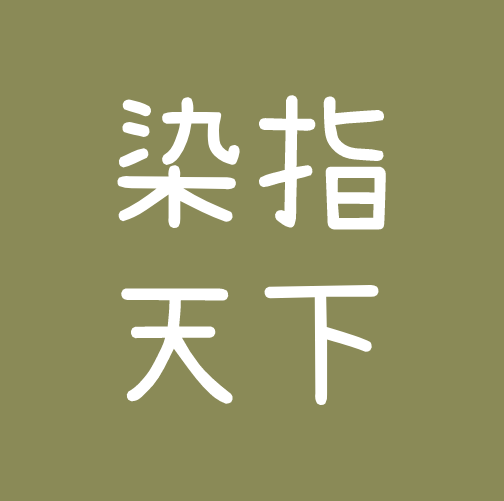
<style>
.page{position:relative;width:504px;height:501px;background:#8a8a57}
.page>*{position:absolute;margin:0}
.t1{font:150px "SetoFont";color:#ffffff}
</style>
<div class="page">
<p class="t1" style="left:117px;top:95px;width:270px;height:311px">染指<br>天下</p>
</div>
